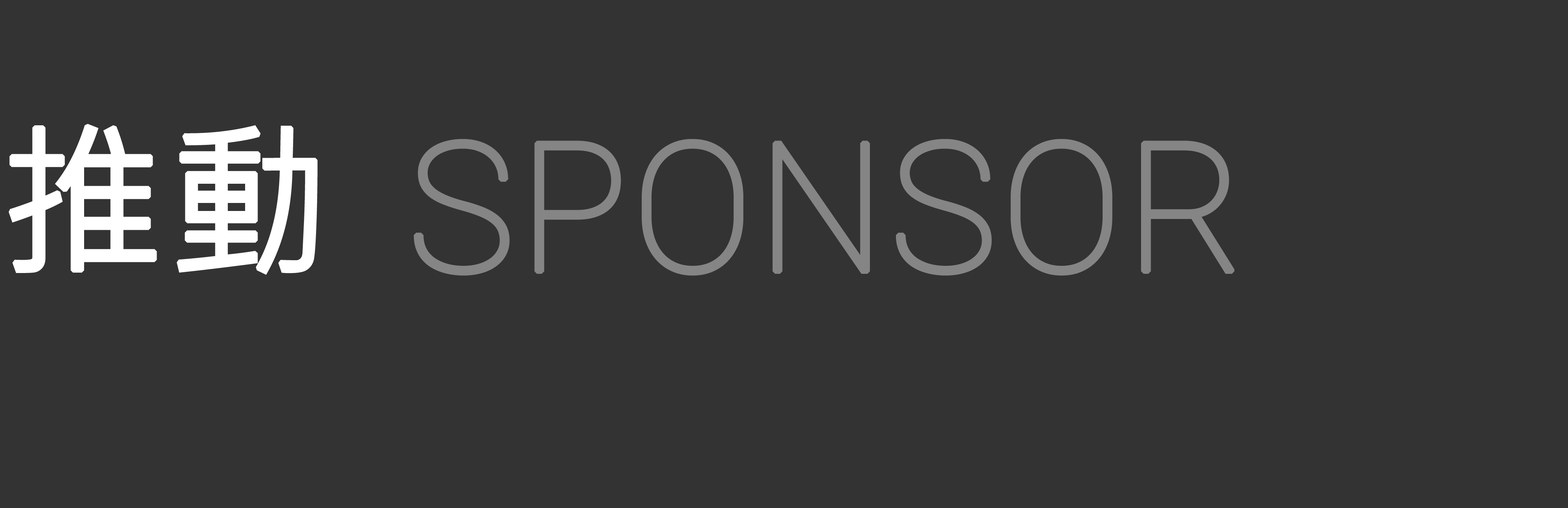
<style>
.page{position:relative;width:1568px;height:508px;background:#333333}
.page>*{position:absolute;margin:0}
.t1{font:163.9px "MicrosoftJhengHeiRegular";color:#ffffff;font-weight:bold}
.t2{font:180.2px "Roboto-Thin";color:#858585;font-weight:bold}
</style>
<div class="page">
<p class="t1" style="left:8px;top:124px;width:310px;height:151px">推動</p>
<p class="t2" style="left:414px;top:139px;width:820px;height:137px">SPONSOR</p>
</div>
